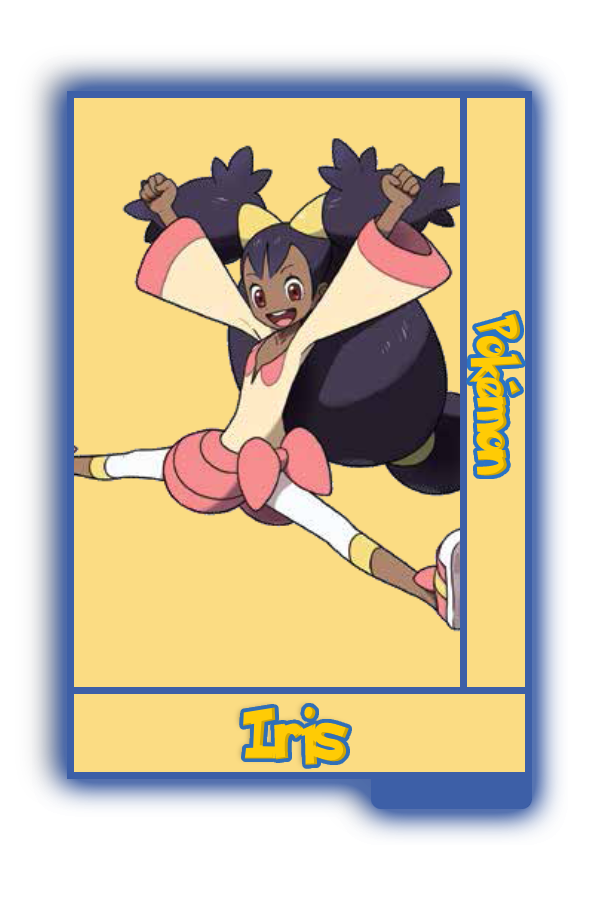
<style>
.page{position:relative;width:600px;height:900px;background:#fbdc83}
.page>*{position:absolute;margin:0}
.t1{font:48.8px "PokemonSolidNormal";color:#ffcb05;scale:0.8 1}
.t2{font:56.6px "PokemonSolidNormal";color:#ffcb05;scale:0.92 1}
</style>
<div class="page">
<p class="t1" style="left:469px;top:313px;width:54px;height:163px;rotate:90deg">Pokémon</p>
<p class="t2" style="left:243px;top:706px;width:106px;height:59px">Iris</p>
</div>
